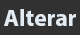
<style>
.page{position:relative;width:80px;height:35px;background:#313131}
.page>*{position:absolute;margin:0}
.t1{font:23.5px "MyriadPro-Bold";color:#e3ecf3}
</style>
<div class="page">
<p class="t1" style="left:4px;top:9px;width:72px;height:17px">Alterar</p>
</div>
